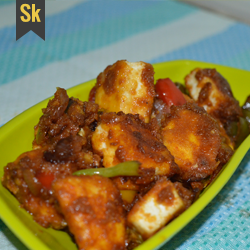
<style>
.page{position:relative;width:250px;height:250px}
.page>*{position:absolute;margin:0}
.t1{font:20px "Oswald-Regular";color:#ebc848;font-weight:bold}
</style>
<div class="page">
<p class="t1" style="left:20px;top:3px;width:21px;height:19px">Sk</p>
</div>
